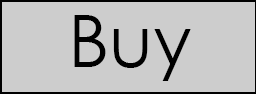
<style>
.page{position:relative;width:256px;height:94px;background:#cdcdcd}
.page>*{position:absolute;margin:0}
.t1{font:72px "CenturyGothic";color:#000000}
</style>
<div class="page">
<p class="t1" style="left:74px;top:15px;width:117px;height:66px">Buy</p>
</div>
